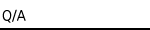
<style>
.page{position:relative;width:150px;height:30px;background:#ffffff}
.page>*{position:absolute;margin:0}
.t1{font:14px "NanumGothic";color:#000000;scale:0.9 1}
</style>
<div class="page">
<p class="t1" style="left:2px;top:9px;width:24px;height:14px">Q/A</p>
</div>
